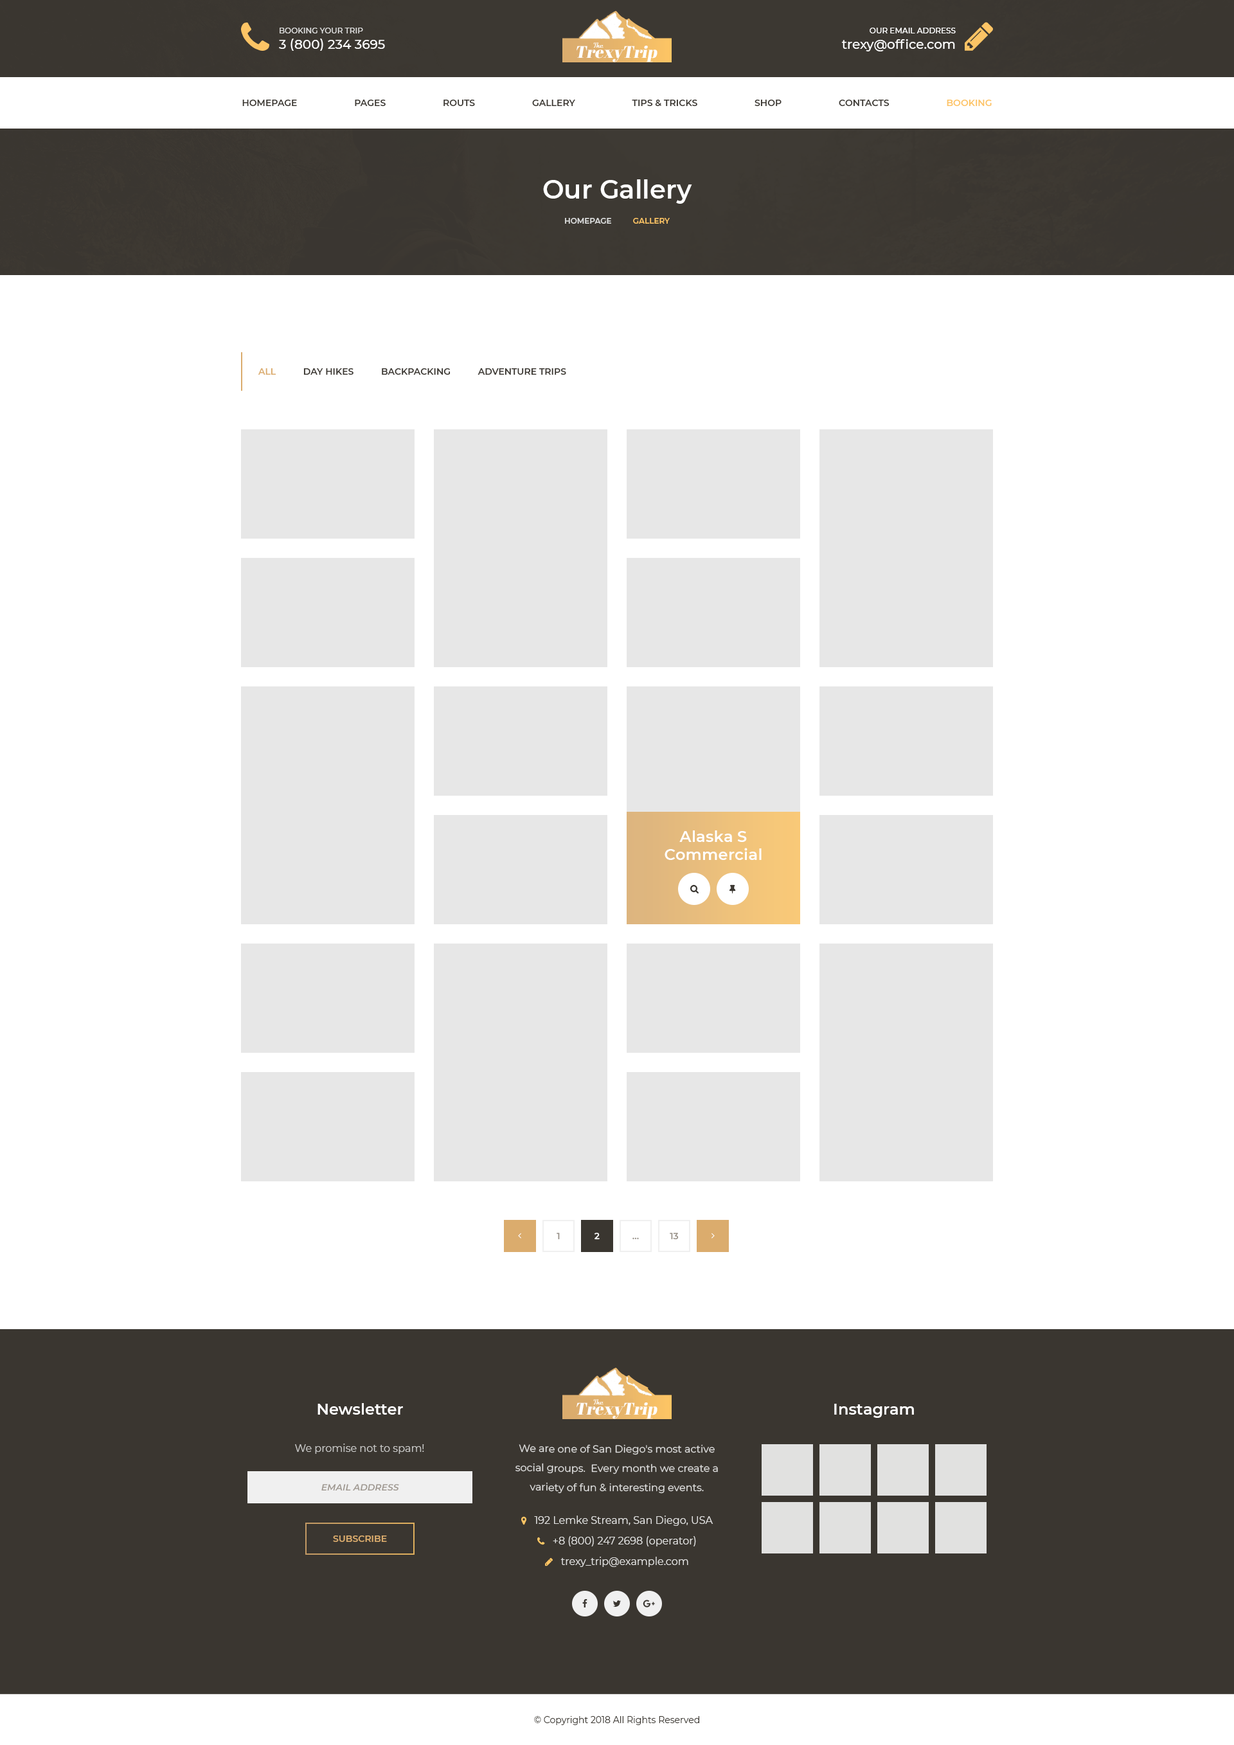
<style>
.page{position:relative;width:1234px;height:1745px;background:#ffffff}
.page>*{position:absolute;margin:0}
.t1{font:7.7px "Montserrat-Medium";color:#e1e1e0;text-transform:uppercase}
.t2{font:7.7px "Montserrat-Medium";color:#fefefe;text-transform:uppercase}
.t3{font:12.9px "Montserrat-Medium";color:#ffffff;text-transform:uppercase}
.t4{font:12.9px "Montserrat-Medium";color:#ffffff}
.t5{font:16.7px "AbrilFatface-Regular";color:#fefefe;font-style:italic}
.t6{font:9px "Montserrat-SemiBold";color:#3a3630;text-transform:uppercase}
.t7{font:9px "Montserrat-SemiBold";color:#fdc465;text-transform:uppercase}
.t8{font:25.7px "Montserrat-SemiBold";color:#ffffff}
.t9{font:7.7px "Montserrat-SemiBold";color:#dedfdf;text-transform:uppercase}
.t10{font:7.7px "Montserrat-SemiBold";color:#fcc465;text-transform:uppercase}
.t11{font:9px "Montserrat-SemiBold";color:#dbac6d;text-transform:uppercase}
.t12{font:15.4px/18px "Montserrat-SemiBold";color:#ffffff}
.t13{font:9px "Montserrat-SemiBold";color:#979087}
.t14{font:9px "Montserrat-SemiBold";color:#ffffff}
.t15{font:15.4px "Montserrat-SemiBold";color:#ffffff}
.t16{font:10.3px "Montserrat-Regular";color:#c7c7c5}
.t17{font:10.3px/19.3px "Montserrat-Regular";color:#e1e1e0}
.t18{font:9px "Montserrat-SemiBoldItalic";color:#9e978f;text-transform:uppercase}
.t19{font:9px "Montserrat-Regular";color:#3a3630}
</style>
<div class="page">
<p class="t1" style="left:280px;top:28px;width:83px;height:5px">Booking your trip</p>
<p class="t2" style="left:870px;top:28px;width:86px;height:5px">Our Email address</p>
<p class="t3" style="left:279px;top:39px;width:106px;height:12px">3 (800) 234 3695</p>
<p class="t4" style="left:842px;top:39px;width:113px;height:12px">trexy@office.com</p>
<p class="t5" style="left:577px;top:46px;width:81px;height:16px">TrexyTrip</p>
<p class="t6" style="left:242px;top:100px;width:750px;height:6px">Homepage                       Pages                       Routs                       Gallery                       Tips &amp; Tricks                       Shop                       Contacts                       <span class="t7">Booking</span></p>
<p class="t8" style="left:543px;top:179px;width:149px;height:25px">Our Gallery</p>
<p class="t9" style="left:565px;top:218px;width:105px;height:6px">homepage          <span class="t10">Gallery</span></p>
<p class="t6" style="left:258px;top:368px;width:308px;height:7px"><span class="t11">all           </span>Day Hikes           Backpacking           Adventure Trips</p>
<p class="t12" style="left:665px;top:831px;width:97px;height:29px;text-align:center">Alaska S Commercial Salmon Fishery</p>
<p class="t13" style="left:557px;top:1233px;width:3px;height:7px">1</p>
<p class="t14" style="left:594px;top:1233px;width:6px;height:7px">2</p>
<p class="t13" style="left:633px;top:1238px;width:6px;height:2px">...</p>
<p class="t13" style="left:670px;top:1233px;width:9px;height:7px">13</p>
<p class="t15" style="left:318px;top:1403px;width:85px;height:12px">Newsletter</p>
<p class="t5" style="left:577px;top:1403px;width:81px;height:16px">TrexyTrip</p>
<p class="t15" style="left:834px;top:1404px;width:80px;height:14px">Instagram</p>
<p class="t16" style="left:295px;top:1444px;width:129px;height:10px">We promise not to spam!</p>
<p class="t17" style="left:516px;top:1444px;width:202px;height:50px;text-align:center">We are one of San Diego's most active social groups.  Every month we create a  variety of fun &amp; interesting events.<br> and activities.</p>
<p class="t18" style="left:321px;top:1484px;width:78px;height:7px">Email address</p>
<p class="t11" style="left:333px;top:1536px;width:54px;height:6px">Subscribe</p>
<p class="t19" style="left:534px;top:1716px;width:165px;height:9px">© Copyright 2018 All Rights Reserved</p>
</div>
